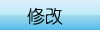
<style>
.page{position:relative;width:100px;height:30px}
.page>*{position:absolute;margin:0}
.t1{font:18px "YouYuan";color:#000a0a}
</style>
<div class="page">
<p class="t1" style="left:27px;top:7px;width:36px;height:18px">修改</p>
</div>
